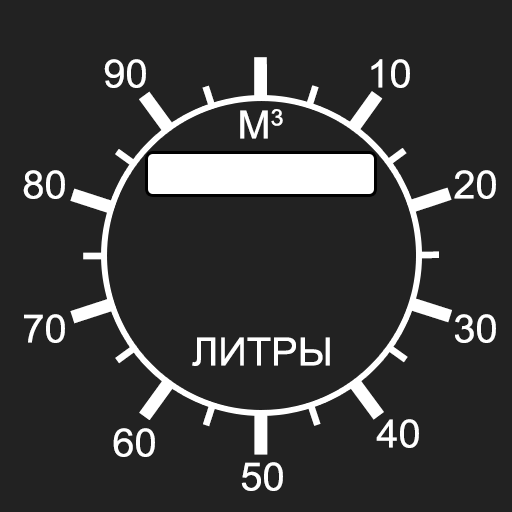
<style>
.page{position:relative;width:512px;height:512px;background:#222222}
.page>*{position:absolute;margin:0}
.t1{font:57.2px "ArialMT";color:#ffffff;scale:2.3 1}
.t2{font:28.6px "ArialMT";color:#ffffff;scale:2.3 1}
.t3{font:38.9px "ArialMT";color:#ffffff}
</style>
<div class="page">
<p class="t1" style="left:70px;top:57px;width:382px;height:398px;rotate:-13deg">I <span class="t2">I </span>I <span class="t2">I </span>I <span class="t2">I </span>I <span class="t2">I </span>I <span class="t2">I </span>I <span class="t2">I </span>I <span class="t2">I </span>I <span class="t2">I </span>I <span class="t2">I </span>I <span class="t2">I</span></p>
<p class="t3" style="left:104px;top:59px;width:42px;height:29px">90</p>
<p class="t3" style="left:371px;top:59px;width:39px;height:29px">10</p>
<p class="t3" style="left:240px;top:109px;width:43px;height:30px">М3</p>
<p class="t3" style="left:23px;top:170px;width:42px;height:29px">80</p>
<p class="t3" style="left:454px;top:170px;width:42px;height:29px">20</p>
<p class="t3" style="left:24px;top:314px;width:41px;height:29px">70</p>
<p class="t3" style="left:455px;top:314px;width:41px;height:29px">30</p>
<p class="t3" style="left:192px;top:337px;width:138px;height:29px">ЛИТРЫ</p>
<p class="t3" style="left:376px;top:419px;width:43px;height:29px">40</p>
<p class="t3" style="left:113px;top:428px;width:42px;height:29px">60</p>
<p class="t3" style="left:241px;top:462px;width:42px;height:29px">50</p>
</div>
